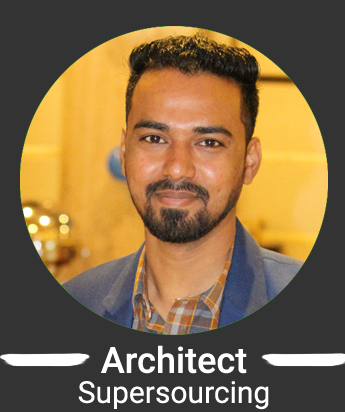
<style>
.page{position:relative;width:345px;height:412px;background:#333333}
.page>*{position:absolute;margin:0}
.t1{font:30px/30px "Roboto-Regular";color:#ffffff}
.t2{font:36px/30px "Roboto-Medium";color:#ffffff}
</style>
<div class="page">
<p class="t1" style="left:78px;top:345px;width:191px;height:65px;text-align:center"><span class="t2">Architect<br></span>Supersourcing</p>
</div>
